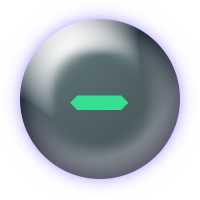
<style>
.page{position:relative;width:200px;height:200px}
.page>*{position:absolute;margin:0}
.t1{font:150px "DS-Digital-Bold";color:#36de92}
</style>
<div class="page">
<p class="t1" style="left:70px;top:95px;width:59px;height:15px">-</p>
</div>
